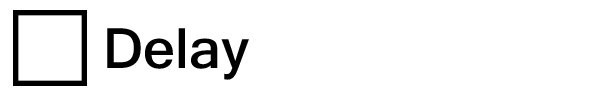
<style>
.page{position:relative;width:600px;height:100px;background:#ffffff}
.page>*{position:absolute;margin:0}
.t1{font:60px "Shruti-Bold";color:#000000}
</style>
<div class="page">
<p class="t1" style="left:107px;top:28px;width:142px;height:52px">Delay</p>
</div>
